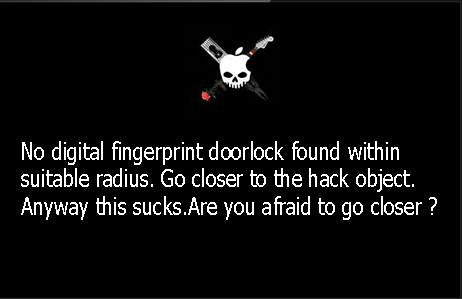
<style>
.page{position:relative;width:462px;height:299px;background:#000000}
.page>*{position:absolute;margin:0}
.t1{font:24px/9.3px "Tahoma";color:#ffffff;scale:0.84 1}
</style>
<div class="page">
<p class="t1" style="left:21px;top:141px;width:416px;height:79px">No digital fingerprint doorlock found within<br><br><br>suitable radius. Go closer to the hack object.<br><br><br>Anyway this sucks.Are you afraid to go closer ?</p>
</div>
